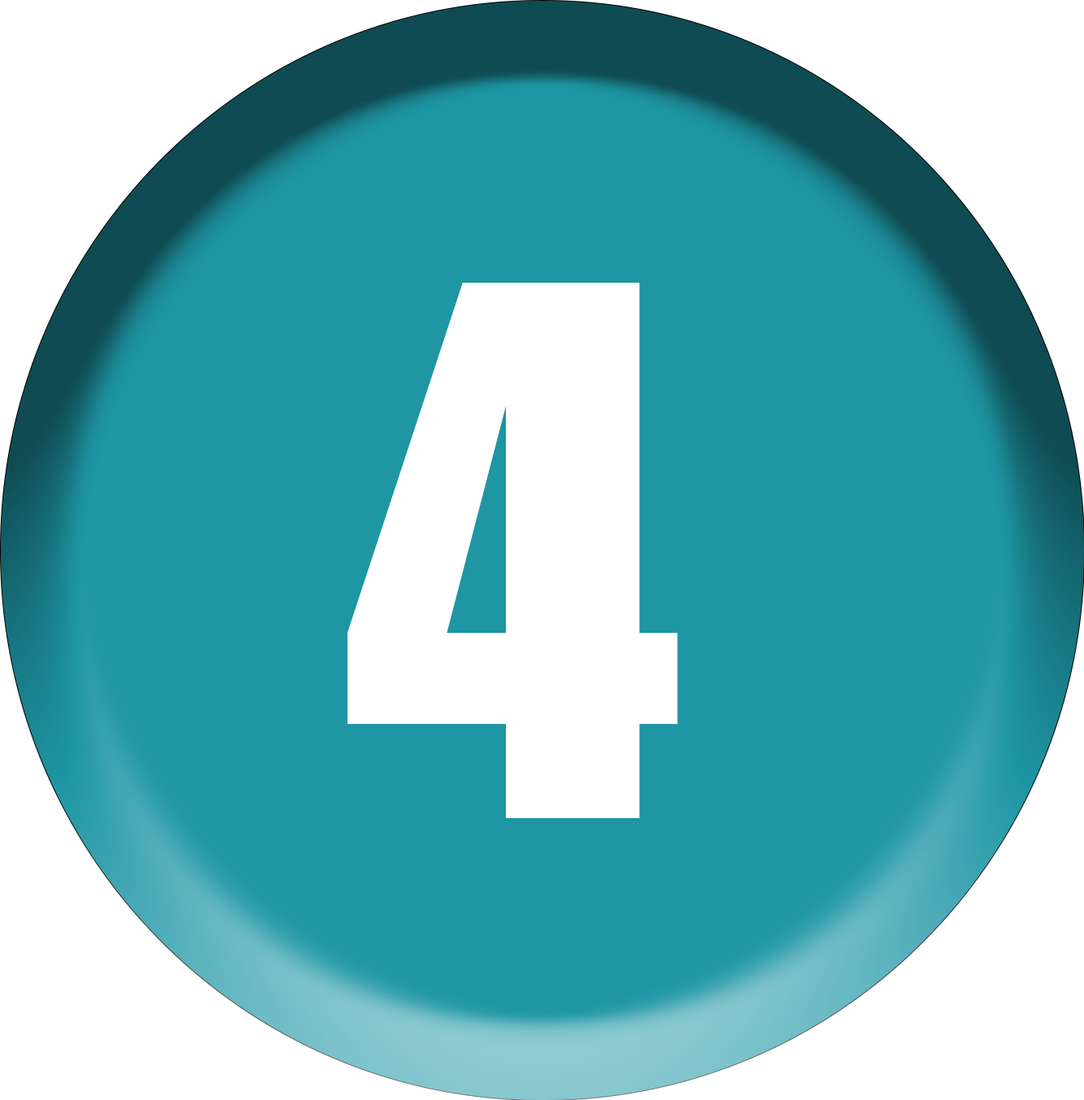
<style>
.page{position:relative;width:1084px;height:1100px;background:#1e96a4}
.page>*{position:absolute;margin:0}
.t1{font:676.8px "Impact";color:#ffffff}
</style>
<div class="page">
<p class="t1" style="left:347px;top:283px;width:331px;height:535px">4</p>
</div>
